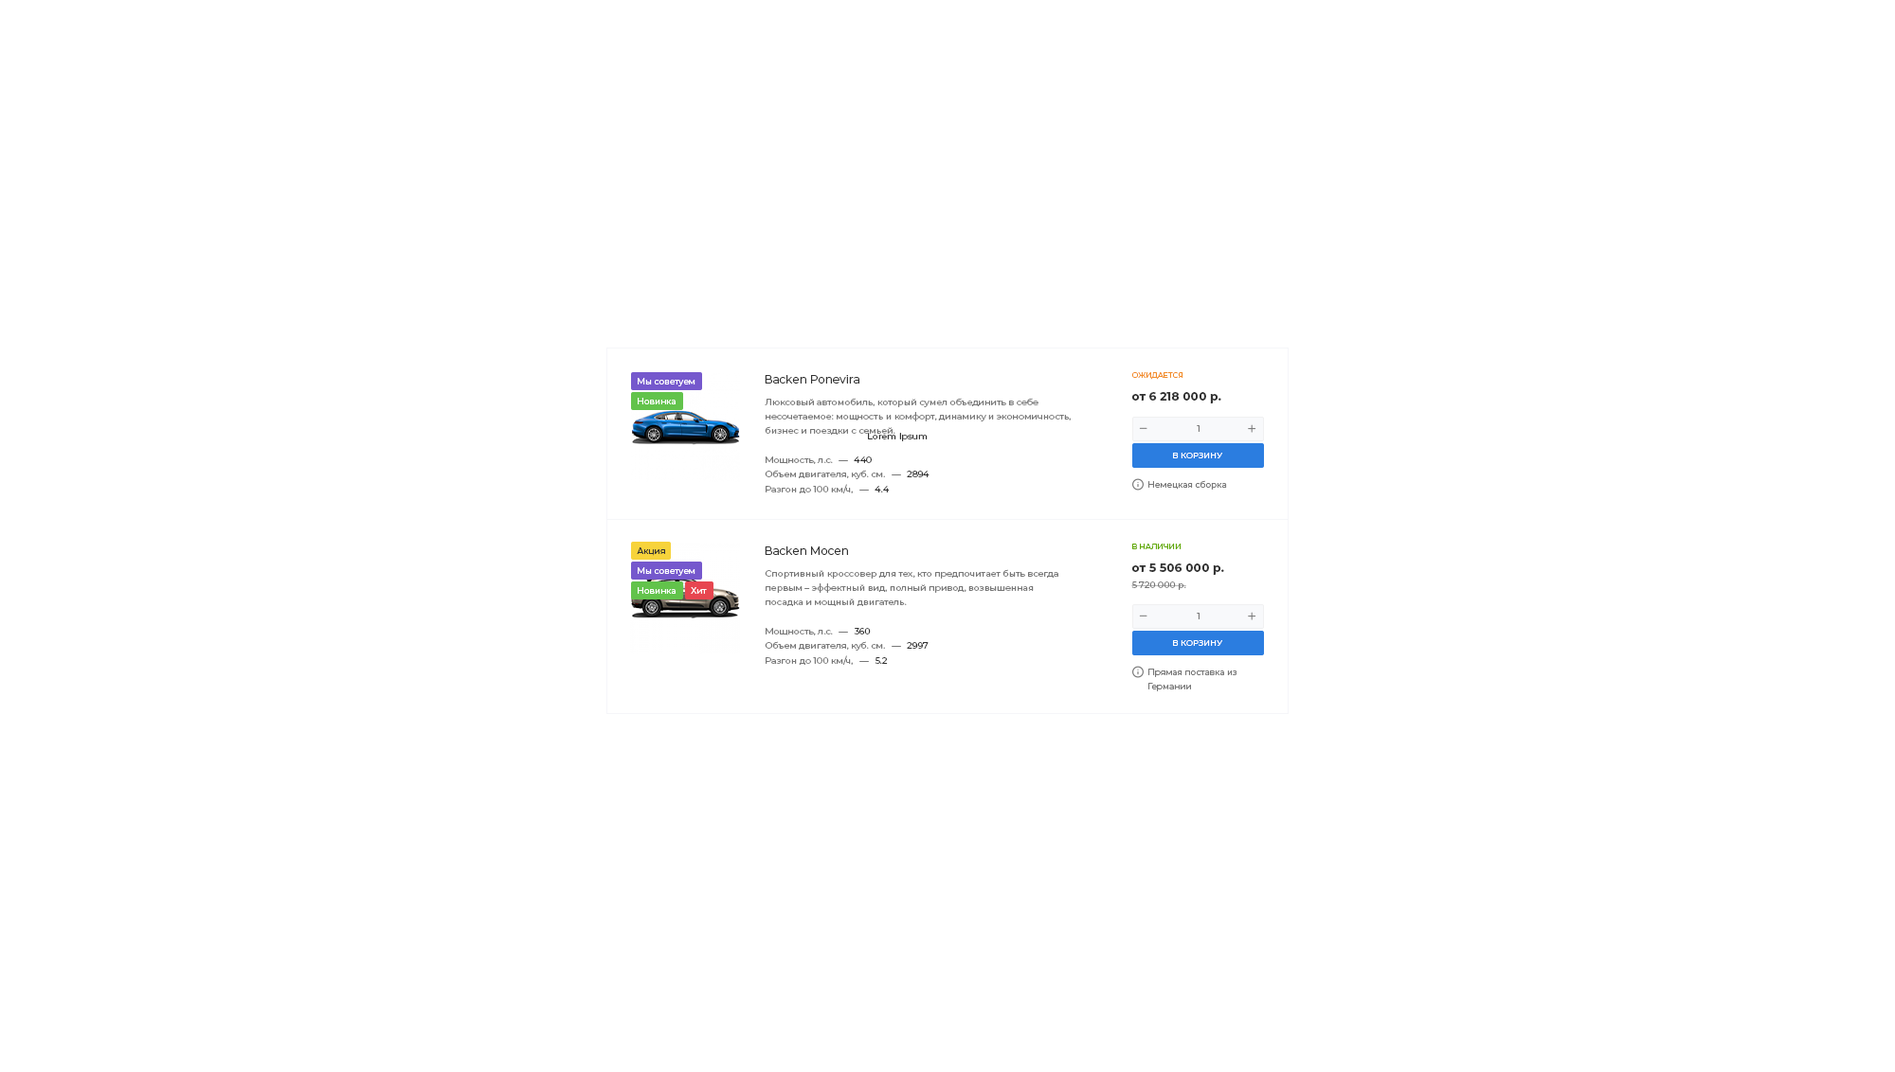
<style>
.page{position:relative;width:1895px;height:1072px;background:#ffffff}
.page>*{position:absolute;margin:0}
.t1{font:11.4px "Montserrat-Regular";color:#333333}
.t2{font:7.6px "Montserrat-Regular";color:#f28c29}
.t3{font:8.5px "Montserrat-Regular";color:#ffffff}
.t4{font:9px/14.2px "Montserrat-Regular";color:#777777}
.t5{font:11.8px "Montserrat-Bold";color:#333333}
.t6{font:8.5px "Montserrat-Regular";color:#777777}
.t7{font:9px "Montserrat-Regular";color:#333333}
.t8{font:9px "Montserrat-Regular";color:#777777}
.t9{font:8.1px "Montserrat-Regular";color:#ffffff}
.t10{font:7.6px "Montserrat-Regular";color:#5fa800}
.t11{font:8.5px "Montserrat-Regular";color:#333333}
.t12{font:8.5px/14.2px "Montserrat-Regular";color:#777777}
</style>
<div class="page">
<p class="t1" style="left:765px;top:375px;width:94px;height:9px">Backen Ponevira</p>
<p class="t2" style="left:1131px;top:372px;width:52px;height:8px">ОЖИДАЕТСЯ</p>
<p class="t3" style="left:638px;top:378px;width:57px;height:9px">Мы советуем</p>
<p class="t3" style="left:638px;top:398px;width:37px;height:7px">Новинка</p>
<p class="t4" style="left:765px;top:398px;width:306px;height:37px">Люксовый автомобиль, который сумел объединить в себе несочетаемое: мощность и комфорт, динамику и экономичность, бизнес и поездки с семьей.</p>
<p class="t5" style="left:1131px;top:392px;width:90px;height:12px">от 6 218 000 р.</p>
<p class="t6" style="left:1197px;top:425px;width:2px;height:7px">1</p>
<p class="t7" style="left:868px;top:433px;width:59px;height:8px">Lorem Ipsum</p>
<p class="t8" style="left:765px;top:457px;width:68px;height:7px">Мощность, л.с.</p>
<p class="t8" style="left:838px;top:460px;width:10px;height:1px">—</p>
<p class="t7" style="left:854px;top:457px;width:18px;height:6px">440</p>
<p class="t9" style="left:1173px;top:453px;width:49px;height:6px">В КОРЗИНУ</p>
<p class="t8" style="left:765px;top:470px;width:120px;height:9px">Объем двигателя, куб. см.</p>
<p class="t7" style="left:907px;top:471px;width:22px;height:6px">2894</p>
<p class="t8" style="left:765px;top:484px;width:88px;height:10px">Разгон до 100 км/ч,</p>
<p class="t7" style="left:874px;top:486px;width:16px;height:7px">4.4</p>
<p class="t8" style="left:891px;top:475px;width:10px;height:1px">—</p>
<p class="t6" style="left:1148px;top:480px;width:79px;height:10px">Немецкая сборка</p>
<p class="t8" style="left:859px;top:490px;width:10px;height:1px">—</p>
<p class="t10" style="left:1132px;top:544px;width:49px;height:5px">В НАЛИЧИИ</p>
<p class="t11" style="left:637px;top:548px;width:28px;height:8px">Акция</p>
<p class="t1" style="left:765px;top:547px;width:83px;height:8px">Backen Mocen</p>
<p class="t3" style="left:638px;top:567px;width:57px;height:9px">Мы советуем</p>
<p class="t4" style="left:765px;top:569px;width:293px;height:37px">Спортивный кроссовер для тех, кто предпочитает быть всегда первым – эффектный вид, полный привод, возвышенная посадка и мощный двигатель.</p>
<p class="t5" style="left:1131px;top:564px;width:93px;height:11px">от 5 506 000 р.</p>
<p class="t8" style="left:1131px;top:582px;width:55px;height:8px">5 720 000 р.</p>
<p class="t3" style="left:638px;top:587px;width:37px;height:7px">Новинка</p>
<p class="t3" style="left:691px;top:587px;width:16px;height:7px">Хит</p>
<p class="t6" style="left:1197px;top:613px;width:2px;height:7px">1</p>
<p class="t8" style="left:765px;top:628px;width:68px;height:8px">Мощность, л.с.</p>
<p class="t7" style="left:854px;top:628px;width:17px;height:7px">360</p>
<p class="t8" style="left:765px;top:641px;width:120px;height:10px">Объем двигателя, куб. см.</p>
<p class="t8" style="left:838px;top:632px;width:10px;height:1px">—</p>
<p class="t9" style="left:1173px;top:640px;width:49px;height:6px">В КОРЗИНУ</p>
<p class="t8" style="left:891px;top:646px;width:10px;height:1px">—</p>
<p class="t7" style="left:907px;top:642px;width:21px;height:7px">2997</p>
<p class="t8" style="left:765px;top:656px;width:88px;height:9px">Разгон до 100 км/ч,</p>
<p class="t8" style="left:859px;top:661px;width:10px;height:1px">—</p>
<p class="t7" style="left:874px;top:657px;width:14px;height:7px">5.2</p>
<p class="t12" style="left:1148px;top:669px;width:89px;height:23px">Прямая поставка из<br>Германии</p>
</div>
